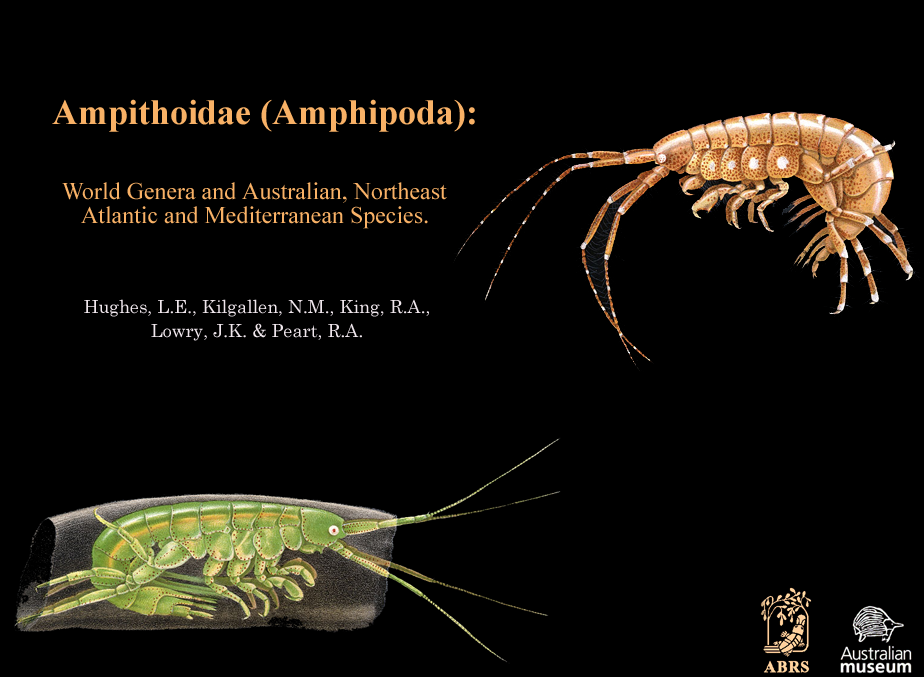
<style>
.page{position:relative;width:924px;height:677px;background:#000000}
.page>*{position:absolute;margin:0}
.t1{font:35.9px "TimesNewRomanPS-BoldMT";color:#f8b166}
.t2{font:23.9px/8px "TimesNewRomanPSMT";color:#f8b166}
.t3{font:17.9px/8px "CenturySchoolbook";color:#f0e7ed}
</style>
<div class="page">
<p class="t1" style="left:52px;top:99px;width:423px;height:33px">Ampithoidae (Amphipoda):</p>
<p class="t2" style="left:62px;top:182px;width:385px;height:47px;text-align:center">World Genera and Australian, Northeast<br><br><br>Atlantic and Mediterranean Species.</p>
<p class="t3" style="left:84px;top:299px;width:345px;height:42px;text-align:center">Hughes, L.E., Kilgallen, N.M., King, R.A.,<br><br><br>Lowry, J.K. &amp; Peart, R.A.</p>
</div>
